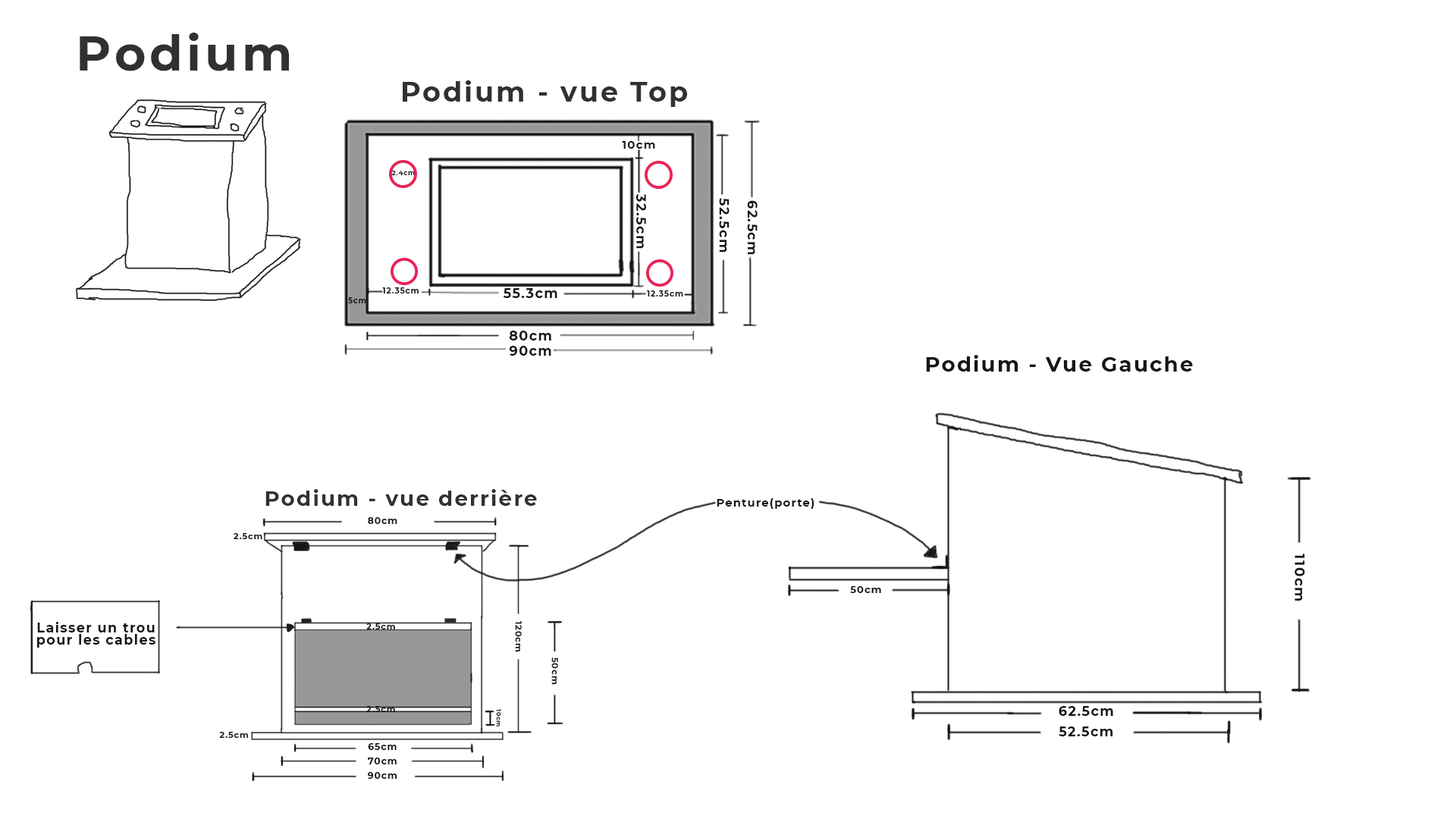
<style>
.page{position:relative;width:1456px;height:819px;background:#ffffff}
.page>*{position:absolute;margin:0}
.t1{font:48px "Montserrat-Bold";letter-spacing:0.08em;color:#313131}
.t2{font:27.8px "Montserrat-Bold";letter-spacing:0.08em;color:#313131}
.t3{font:11.4px "Montserrat-Bold";letter-spacing:0.08em;color:#161616}
.t4{font:6.5px "Montserrat-Bold";letter-spacing:0.08em;color:#161616}
.t5{font:13.4px "Montserrat-Bold";letter-spacing:0.08em;color:#161616}
.t6{font:8px "Montserrat-Bold";letter-spacing:0.08em;color:#161616}
.t7{font:7.4px "Montserrat-Bold";letter-spacing:0.08em;color:#161616}
.t8{font:21px "Montserrat-Bold";letter-spacing:0.08em;color:#161616}
.t9{font:21px "Montserrat-Bold";letter-spacing:0.08em;color:#313131}
.t10{font:11.2px "Montserrat-Bold";letter-spacing:0.08em;color:#161616}
.t11{font:9.3px "Montserrat-Bold";letter-spacing:0.08em;color:#161616}
.t12{font:8.5px "Montserrat-Bold";letter-spacing:0.08em;color:#161616}
.t13{font:13.9px "Montserrat-Bold";letter-spacing:0.08em;color:#161616}
.t14{font:9.9px "Montserrat-Bold";letter-spacing:0.08em;color:#161616}
.t15{font:13.3px/12.8px "Montserrat-Bold";letter-spacing:0.08em;color:#161616}
.t16{font:8.6px "Montserrat-Bold";letter-spacing:0.08em;color:#161616}
.t17{font:5.9px "Montserrat-Bold";letter-spacing:0.08em;color:#161616}
</style>
<div class="page">
<p class="t1" style="left:80px;top:33px;width:209px;height:38px">Podium</p>
<p class="t2" style="left:403px;top:80px;width:285px;height:27px">Podium - vue Top</p>
<p class="t3" style="left:622px;top:141px;width:33px;height:8px">10cm</p>
<p class="t4" style="left:391px;top:171px;width:24px;height:4px">2.4cm</p>
<p class="t5" style="left:636px;top:194px;width:10px;height:55px;rotate:90deg">32.5cm</p>
<p class="t5" style="left:719px;top:198px;width:11px;height:55px;rotate:90deg">52.5cm</p>
<p class="t5" style="left:747px;top:200px;width:11px;height:55px;rotate:90deg">62.5cm</p>
<p class="t6" style="left:382px;top:287px;width:37px;height:6px">12.35cm</p>
<p class="t5" style="left:503px;top:288px;width:54px;height:10px">55.3cm</p>
<p class="t6" style="left:647px;top:290px;width:36px;height:7px">12.35cm</p>
<p class="t7" style="left:348px;top:297px;width:18px;height:6px">5cm</p>
<p class="t5" style="left:509px;top:331px;width:42px;height:9px">80cm</p>
<p class="t5" style="left:509px;top:346px;width:42px;height:10px">90cm</p>
<p class="t8" style="left:926px;top:355px;width:267px;height:17px">Podium - Vue Gauche</p>
<p class="t9" style="left:265px;top:489px;width:272px;height:17px">Podium - vue derrière</p>
<p class="t10" style="left:717px;top:498px;width:97px;height:11px">Penture(porte)</p>
<p class="t11" style="left:368px;top:517px;width:29px;height:7px">80cm</p>
<p class="t12" style="left:234px;top:533px;width:28px;height:6px">2.5cm</p>
<p class="t13" style="left:1294px;top:554px;width:11px;height:47px;rotate:90deg">110cm</p>
<p class="t14" style="left:850px;top:586px;width:31px;height:7px">50cm</p>
<p class="t15" style="left:37px;top:622px;width:118px;height:26px;text-align:center">Laisser un trou<br>pour les cables</p>
<p class="t12" style="left:366px;top:623px;width:29px;height:6px">2.5cm</p>
<p class="t16" style="left:515px;top:621px;width:7px;height:31px;rotate:90deg">120cm</p>
<p class="t16" style="left:551px;top:657px;width:7px;height:28px;rotate:90deg">50cm</p>
<p class="t12" style="left:366px;top:706px;width:29px;height:6px">2.5cm</p>
<p class="t17" style="left:496px;top:708px;width:5px;height:18px;rotate:90deg">10cm</p>
<p class="t5" style="left:1059px;top:706px;width:54px;height:10px">62.5cm</p>
<p class="t12" style="left:219px;top:732px;width:30px;height:6px">2.5cm</p>
<p class="t5" style="left:1059px;top:726px;width:54px;height:10px">52.5cm</p>
<p class="t11" style="left:368px;top:743px;width:29px;height:7px">65cm</p>
<p class="t11" style="left:368px;top:758px;width:29px;height:6px">70cm</p>
<p class="t11" style="left:368px;top:772px;width:29px;height:7px">90cm</p>
</div>
